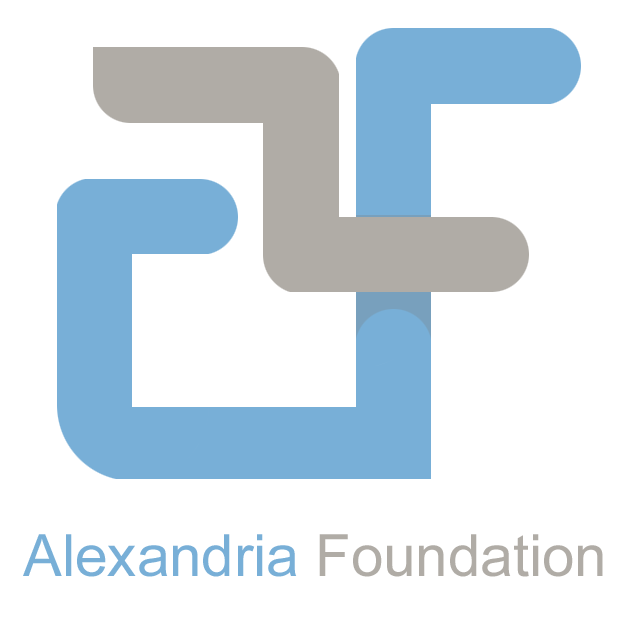
<style>
.page{position:relative;width:630px;height:630px;background:#ffffff}
.page>*{position:absolute;margin:0}
.t1{font:58.3px "ArialMT";color:#78afd7}
.t2{font:58.3px "ArialMT";color:#b0aca6}
</style>
<div class="page">
<p class="t1" style="left:23px;top:534px;width:580px;height:43px">Alexandria <span class="t2">Foundation</span></p>
</div>
